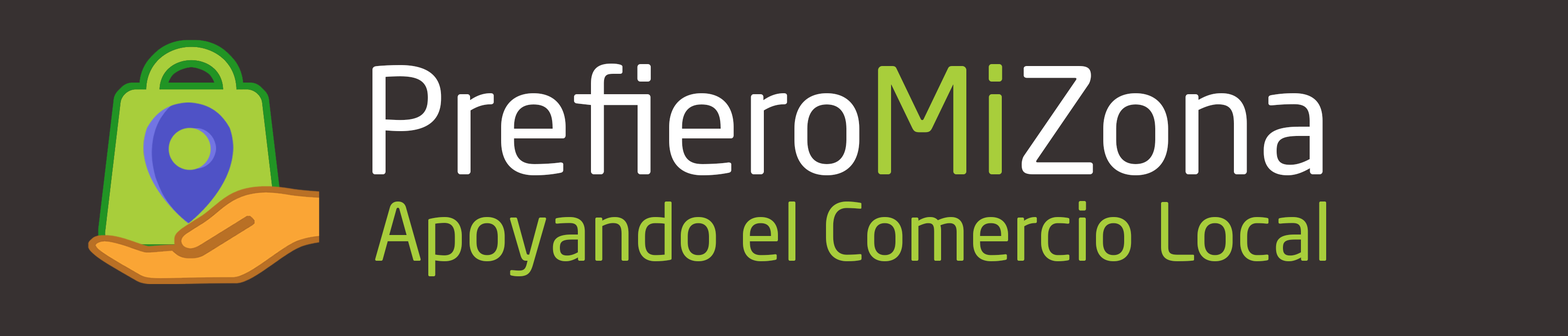
<style>
.page{position:relative;width:1568px;height:336px;background:#373131}
.page>*{position:absolute;margin:0}
.t1{font:145.7px "NeoSansStd-Regular";color:#ffffff}
.t2{font:145.7px "NeoSansStd-Regular";color:#a8ce3b}
.t3{font:78.9px "NeoSansStd-Regular";color:#a8ce3b}
</style>
<div class="page">
<p class="t1" style="left:372px;top:64px;width:951px;height:111px">Prefiero<span class="t2">Mi</span>Zona</p>
<p class="t3" style="left:375px;top:201px;width:951px;height:75px">Apoyando el Comercio Local</p>
</div>
